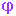
<style>
.page{position:relative;width:16px;height:16px;background:#ffffff}
.page>*{position:absolute;margin:0}
.t1{font:18.7px "Calibri";color:#9933ff}
</style>
<div class="page">
<p class="t1" style="left:2px;top:2px;width:11px;height:12px">ϕ</p>
</div>
